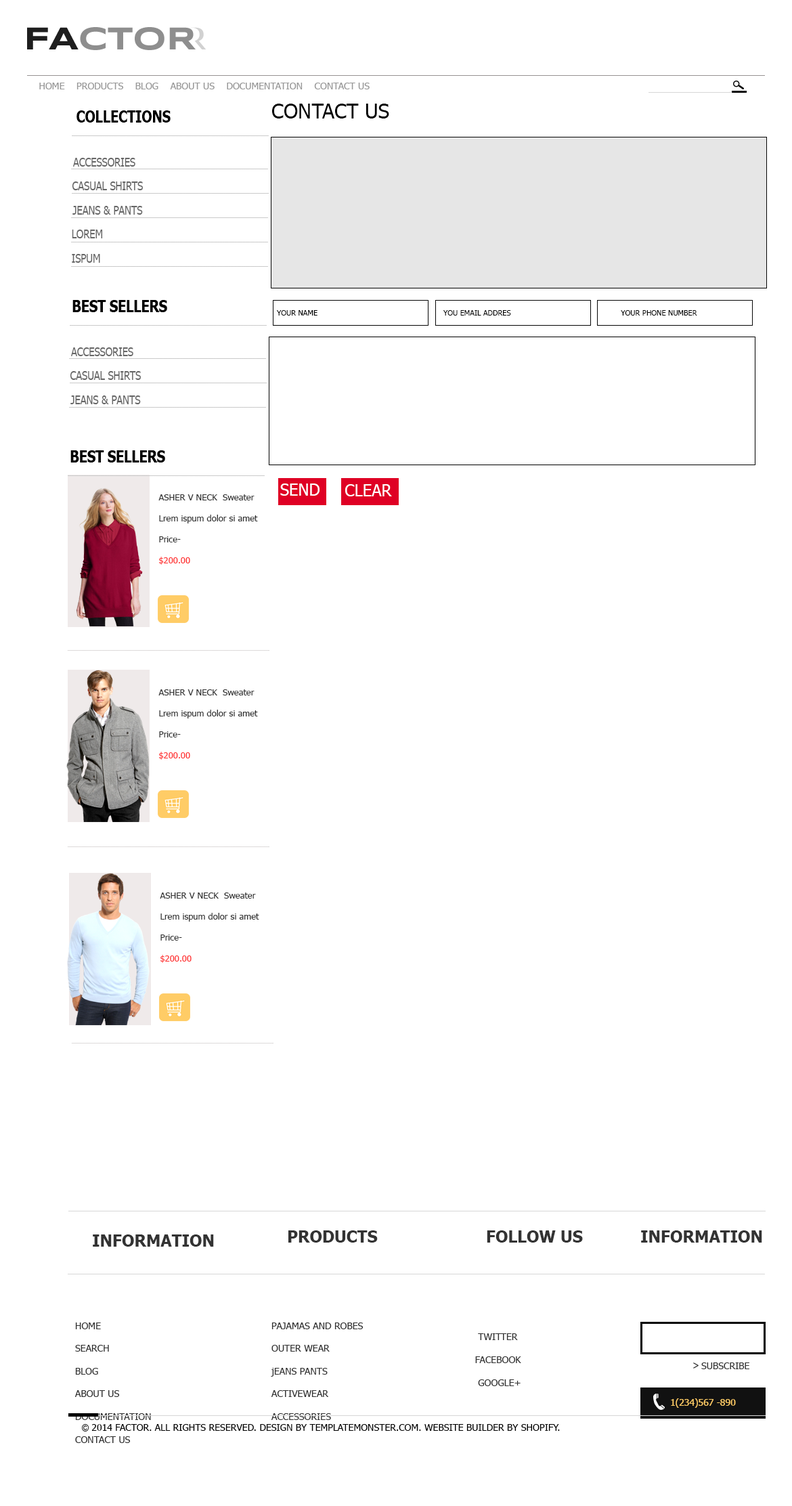
<style>
.page{position:relative;width:792px;height:1506px;background:#ffffff}
.page>*{position:absolute;margin:0}
.t1{font:9.5px "Tahoma";color:#999999;text-transform:uppercase}
.t2{font:16.3px "Tahoma-Bold";color:#000000;scale:0.81 1}
.t3{font:20.3px "Tahoma";color:#000000}
.t4{font:12.2px "Tahoma";color:#666666;scale:0.81 1}
.t5{font:7.4px "Tahoma";color:#000000}
.t6{font:16.2px "Tahoma";color:#ffffff}
.t7{font:8.8px "Tahoma";color:#333333}
.t8{font:8.8px "Tahoma";color:#ff3333}
.t9{font:16.2px "Tahoma-Bold";color:#333333}
.t10{font:16.2px "Tahoma-Bold";color:#333333;text-transform:uppercase}
.t11{font:9.5px "Tahoma";color:#333333}
.t12{font:9.5px "Tahoma";color:#333333;text-transform:uppercase}
.t13{font:10.7px "Tahoma";color:#333333;text-transform:uppercase;scale:0.87 1}
.t14{font:9.5px "Tahoma";color:#ffcc66;text-transform:uppercase}
.t15{font:9.5px "Tahoma";color:#000000;text-transform:uppercase}
</style>
<div class="page">
<p class="t1" style="left:39px;top:83px;width:331px;height:6px">Home    Products    Blog    About Us    Documentation    Contact us</p>
<p class="t2" style="left:76px;top:110px;width:95px;height:13px">COLLECTIONS</p>
<p class="t3" style="left:272px;top:104px;width:117px;height:14px">CONTACT US</p>
<p class="t4" style="left:73px;top:158px;width:62px;height:9px">ACCESSORIES</p>
<p class="t4" style="left:72px;top:181px;width:71px;height:9px">CASUAL SHIRTS</p>
<p class="t4" style="left:72px;top:206px;width:71px;height:9px">JEANS &amp; PANTS</p>
<p class="t4" style="left:72px;top:229px;width:31px;height:9px">LOREM</p>
<p class="t4" style="left:72px;top:254px;width:28px;height:9px">ISPUM</p>
<p class="t5" style="left:276px;top:310px;width:41px;height:5px">YOUR NAME</p>
<p class="t5" style="left:443px;top:310px;width:68px;height:5px">YOU EMAIL ADDRES</p>
<p class="t5" style="left:621px;top:310px;width:76px;height:5px">YOUR PHONE NUMBER</p>
<p class="t4" style="left:71px;top:347px;width:62px;height:9px">ACCESSORIES</p>
<p class="t4" style="left:70px;top:371px;width:71px;height:9px">CASUAL SHIRTS</p>
<p class="t4" style="left:70px;top:395px;width:71px;height:9px">JEANS &amp; PANTS</p>
<p class="t6" style="left:280px;top:483px;width:40px;height:13px">SEND</p>
<p class="t6" style="left:345px;top:484px;width:47px;height:12px">CLEAR</p>
<p class="t7" style="left:158px;top:494px;width:100px;height:71px">ASHER V NECK  Sweater<br><br>Lrem ispum dolor si amet<br><br>Price- <br><br><span class="t8">$200.00</span></p>
<p class="t7" style="left:158px;top:689px;width:100px;height:71px">ASHER V NECK  Sweater<br><br>Lrem ispum dolor si amet<br><br>Price- <br><br><span class="t8">$200.00</span></p>
<p class="t7" style="left:160px;top:892px;width:99px;height:71px">ASHER V NECK  Sweater<br><br>Lrem ispum dolor si amet<br><br>Price- <br><br><span class="t8">$200.00</span></p>
<p class="t9" style="left:93px;top:1234px;width:121px;height:12px">INFORMATION</p>
<p class="t10" style="left:288px;top:1230px;width:90px;height:12px">Products</p>
<p class="t10" style="left:487px;top:1230px;width:96px;height:12px">Follow us</p>
<p class="t9" style="left:641px;top:1230px;width:121px;height:12px">INFORMATION</p>
<p class="t11" style="left:74px;top:1322px;width:77px;height:121px">HOME<br><br>SEARCH<br><br>BLOG<br><br>ABOUT US<br><br>DOCUMENTATION<br><br>CONTACT US</p>
<p class="t11" style="left:271px;top:1322px;width:93px;height:98px">PAJAMAS AND ROBES<br><br>OUTER WEAR<br><br>jEANS PANTS<br><br><span class="t12">Activewear<br><br>Accessories</span></p>
<p class="t12" style="left:475px;top:1333px;width:46px;height:53px">Twitter<br><br> Facebook<br><br>  Google+</p>
<p class="t13" style="left:693px;top:1362px;width:6px;height:6px">&gt;</p>
<p class="t12" style="left:701px;top:1362px;width:48px;height:7px">SUBSCRIBE</p>
<p class="t14" style="left:671px;top:1398px;width:65px;height:9px">1(234)567 -890</p>
<p class="t15" style="left:91px;top:1424px;width:469px;height:6px">2014 FACTOR. All Rights Reserved. Design by TemplateMonster.com. Website builder by Shopify.</p>
</div>
